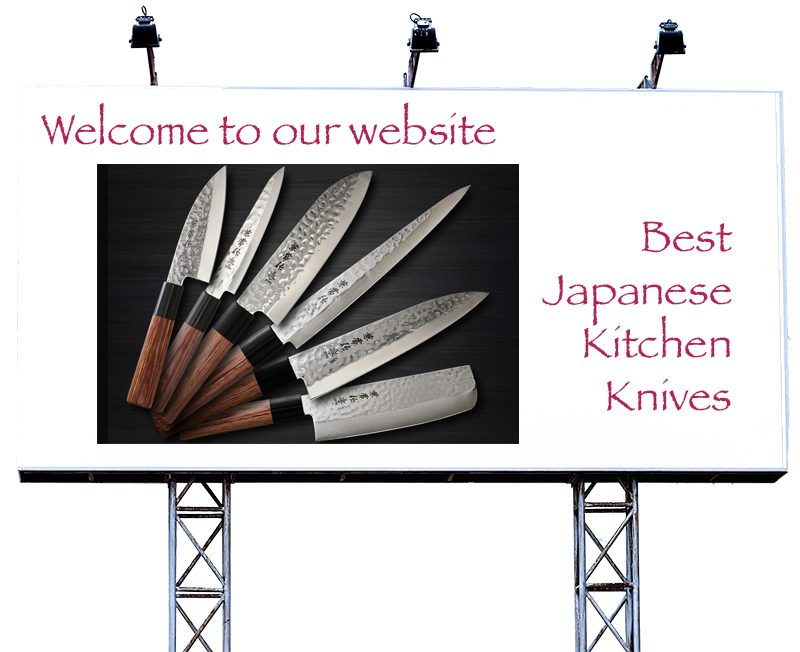
<style>
.page{position:relative;width:800px;height:652px;background:#ffffff}
.page>*{position:absolute;margin:0}
.t1{font:44px "Papyrus";color:#b42157}
</style>
<div class="page">
<p class="t1" style="left:41px;top:102px;width:455px;height:43px">Welcome to our website</p>
<p class="t1" style="left:542px;top:221px;width:191px;height:190px;text-align:right">Best<br>Japanese<br>Kitchen<br>Knives</p>
</div>
